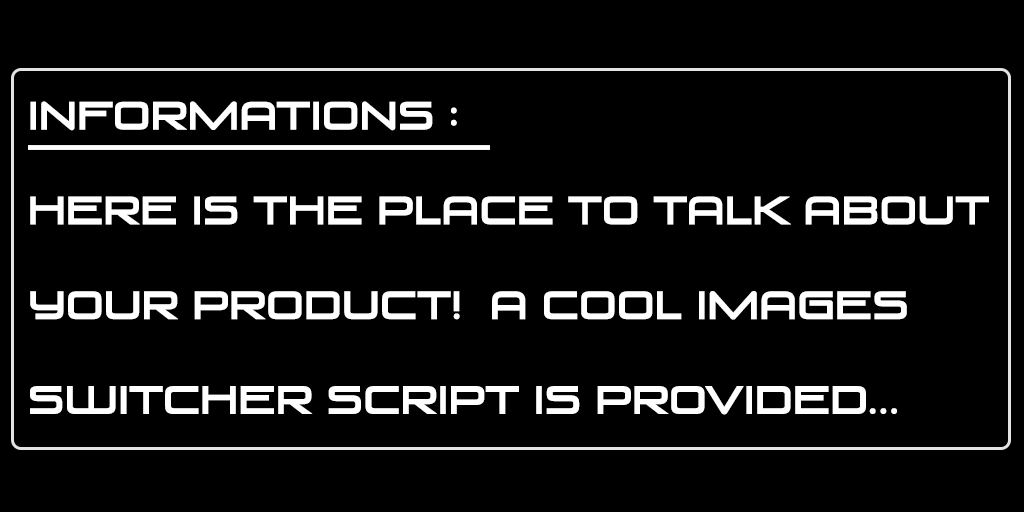
<style>
.page{position:relative;width:1024px;height:512px;background:#000000}
.page>*{position:absolute;margin:0}
.t1{font:37px/94.8px "VenusRising-Regular";letter-spacing:-0.01em;color:#ffffff;font-weight:bold}
</style>
<div class="page">
<p class="t1" style="left:30px;top:101px;width:959px;height:314px">INFORMATIONS : <br>HERE IS THE PLACE TO TALK ABOUT<br>YOUR PRODUCT!  A COOL IMAGES<br>SWITCHER SCRIPT IS PROVIDED...</p>
</div>
